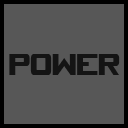
<style>
.page{position:relative;width:128px;height:128px;background:#575757}
.page>*{position:absolute;margin:0}
.t1{font:32px "SpaceMarine-Nominal";letter-spacing:-0.06em;color:#141414;scale:0.72 1}
</style>
<div class="page">
<p class="t1" style="left:9px;top:54px;width:111px;height:21px">POWER</p>
</div>
